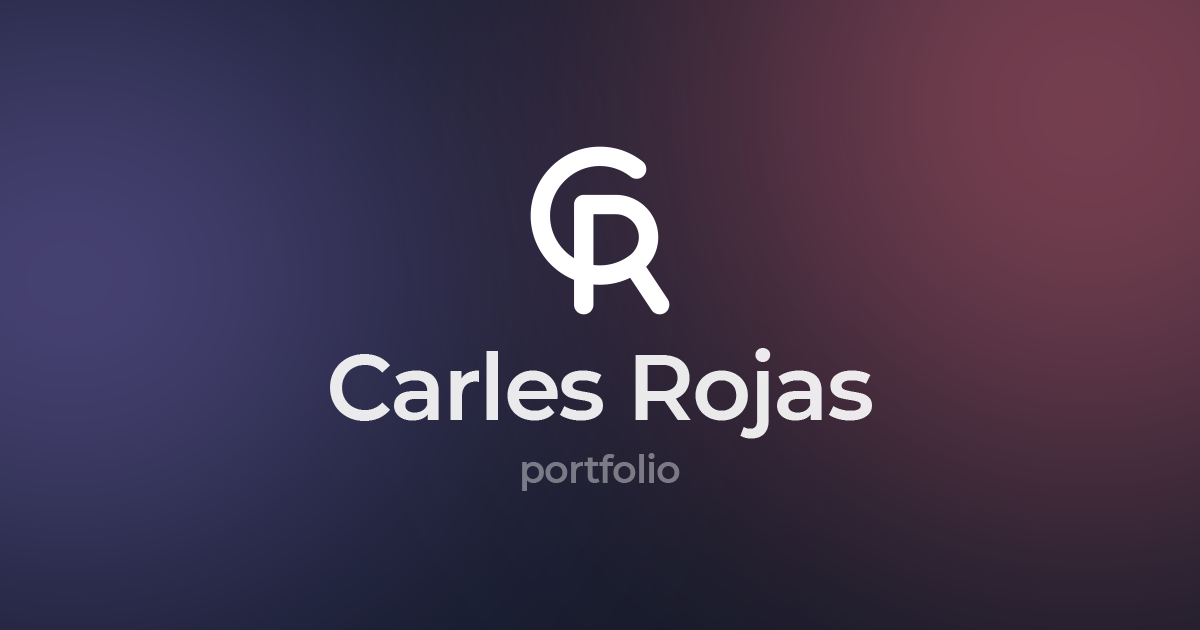
<style>
.page{position:relative;width:1200px;height:630px}
.page>*{position:absolute;margin:0}
.t1{font:92px "Montserrat-SemiBold";letter-spacing:-0.025em;color:#ffffff}
.t2{font:38.3px "Montserrat-SemiBold";letter-spacing:-0.025em;color:#7b7a86}
</style>
<div class="page">
<p class="t1" style="left:330px;top:348px;width:542px;height:91px;opacity:0.9">Carles Rojas</p>
<p class="t2" style="left:522px;top:453px;width:158px;height:38px">portfolio</p>
</div>
